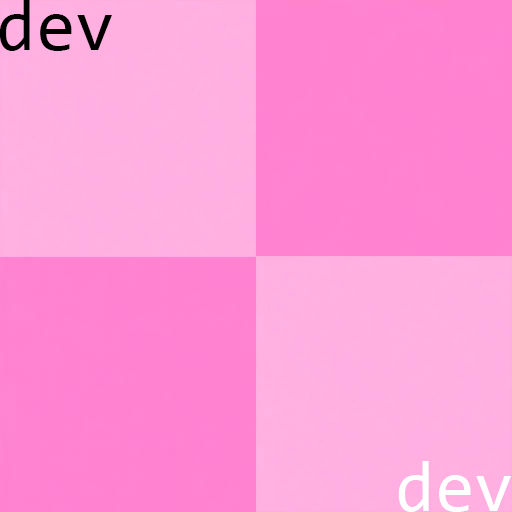
<style>
.page{position:relative;width:512px;height:512px;background:#ff82d0}
.page>*{position:absolute;margin:0}
.t1{font:72px "Consolas";color:#000000}
.t2{font:72px "Consolas";color:#ffffff}
</style>
<div class="page">
<p class="t1" style="left:0px;top:0px;width:112px;height:51px">dev</p>
<p class="t2" style="left:398px;top:461px;width:113px;height:51px">dev</p>
</div>
